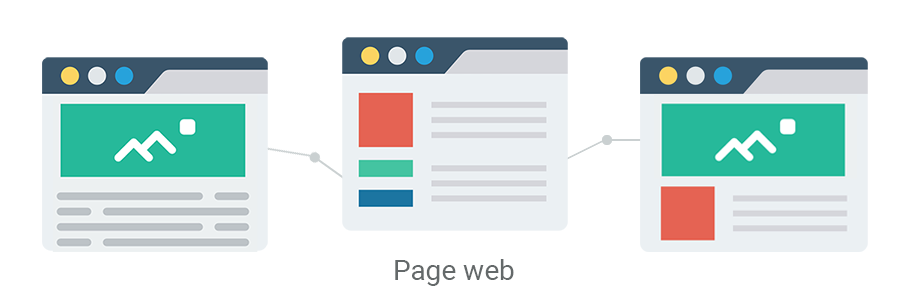
<style>
.page{position:relative;width:900px;height:300px;background:#ffffff}
.page>*{position:absolute;margin:0}
.t1{font:28px "Roboto-Regular";color:#64696a}
</style>
<div class="page">
<p class="t1" style="left:395px;top:259px;width:119px;height:27px">Page web</p>
</div>
